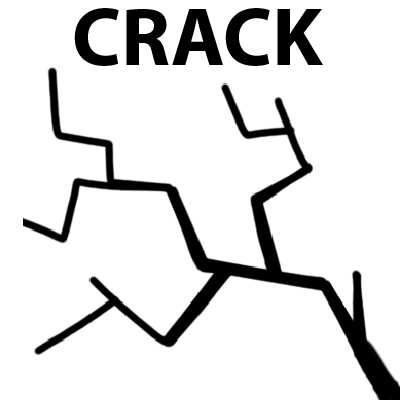
<style>
.page{position:relative;width:400px;height:400px;background:#ffffff}
.page>*{position:absolute;margin:0}
.t1{font:82.4px "MyriadPro-Bold";color:#000000}
</style>
<div class="page">
<p class="t1" style="left:74px;top:8px;width:249px;height:58px">CRACK</p>
</div>
